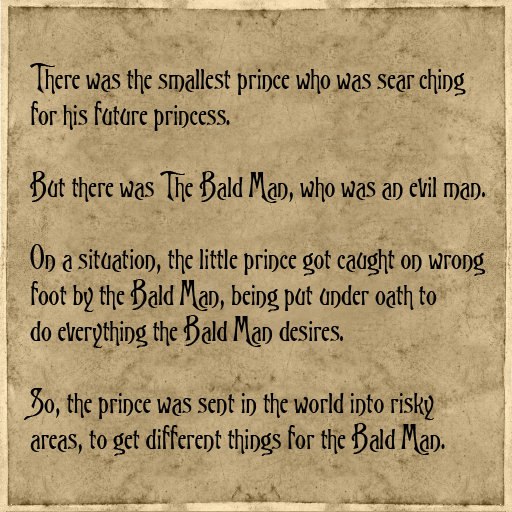
<style>
.page{position:relative;width:512px;height:512px}
.page>*{position:absolute;margin:0}
.t1{font:30px "TriniganFG";color:#000000}
</style>
<div class="page">
<p class="t1" style="left:23px;top:63px;width:463px;height:393px">There was the smallest prince who was searching<br>for his future princess.<br><br>But there was The Bald Man, who was an evil man.<br><br>On a situation, the little prince got caught on wrong<br>foot by the Bald Man, being put under oath to<br>do everything the Bald Man desires.<br><br>So, the prince was sent in the world into risky <br>areas, to get different things for the Bald Man.</p>
</div>
